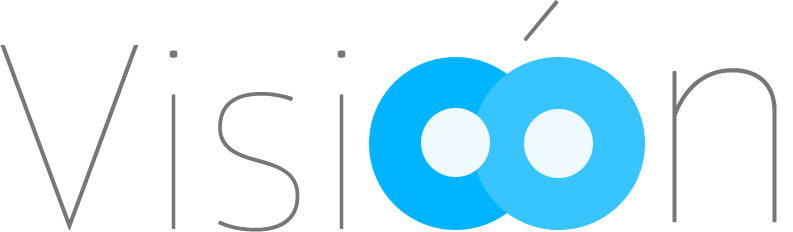
<style>
.page{position:relative;width:793px;height:232px;background:#ffffff}
.page>*{position:absolute;margin:0}
.t1{font:255.6px "GloberThinFree";color:#777777}
.t2{font:287.1px "GloberThinFree";color:#777777}
</style>
<div class="page">
<p class="t1" style="left:523px;top:0px;width:36px;height:41px">´</p>
<p class="t1" style="left:0px;top:45px;width:346px;height:187px">Visi</p>
<p class="t2" style="left:672px;top:68px;width:105px;height:155px">n</p>
</div>
